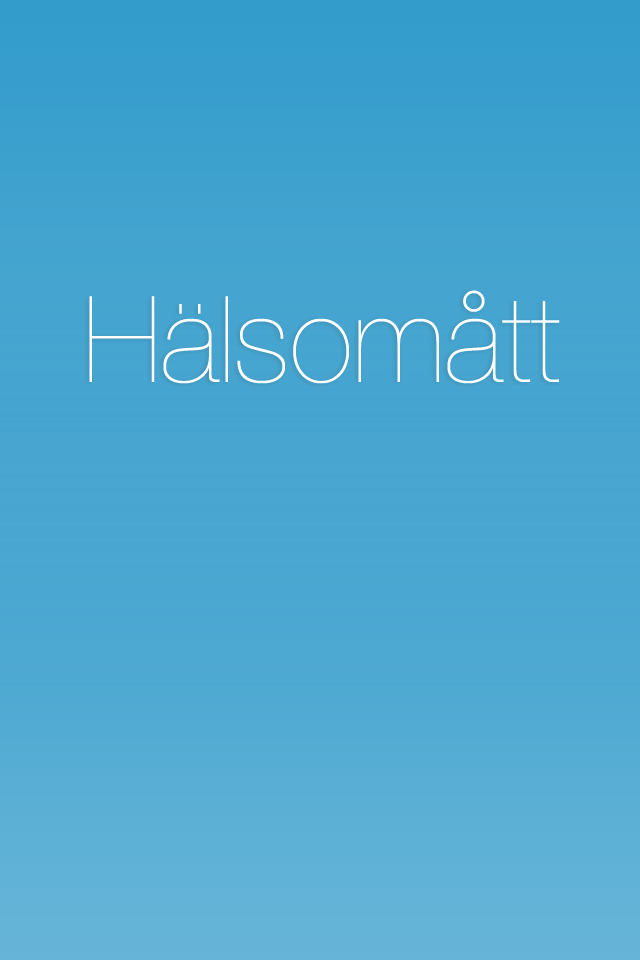
<style>
.page{position:relative;width:640px;height:960px}
.page>*{position:absolute;margin:0}
.t1{font:120px "HelveticaNeue-UltraLight";color:#ffffff}
</style>
<div class="page">
<p class="t1" style="left:89px;top:290px;width:471px;height:94px">Hälsomått</p>
</div>
